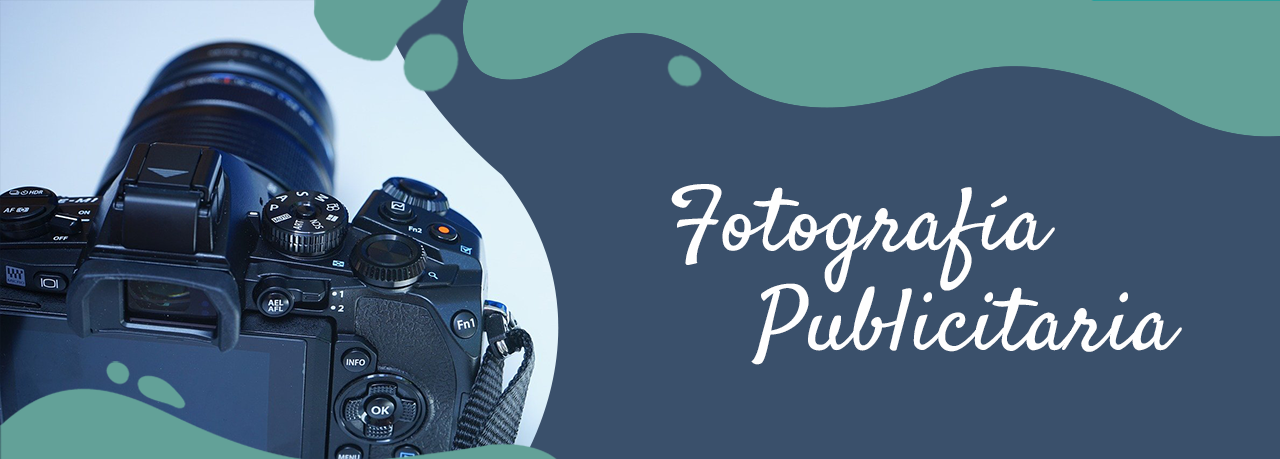
<style>
.page{position:relative;width:1280px;height:459px;background:#3a506b}
.page>*{position:absolute;margin:0}
.t1{font:88.4px "Satisfy-Regular";letter-spacing:0.01em;color:#fefefe;scale:1.05 1}
</style>
<div class="page">
<p class="t1" style="left:671px;top:184px;width:384px;height:109px">Fotografía</p>
<p class="t1" style="left:751px;top:283px;width:431px;height:82px">Publicitaria</p>
</div>
